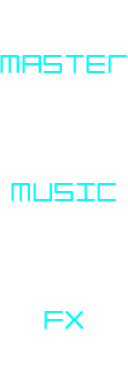
<style>
.page{position:relative;width:128px;height:384px;background:#ffffff}
.page>*{position:absolute;margin:0}
.t1{font:33.3px "LuggageRoundLight";color:#00ffff}
</style>
<div class="page">
<p class="t1" style="left:0px;top:55px;width:127px;height:18px">MASTER</p>
<p class="t1" style="left:11px;top:183px;width:105px;height:18px">MUSIC</p>
<p class="t1" style="left:44px;top:311px;width:39px;height:18px">FX</p>
</div>
